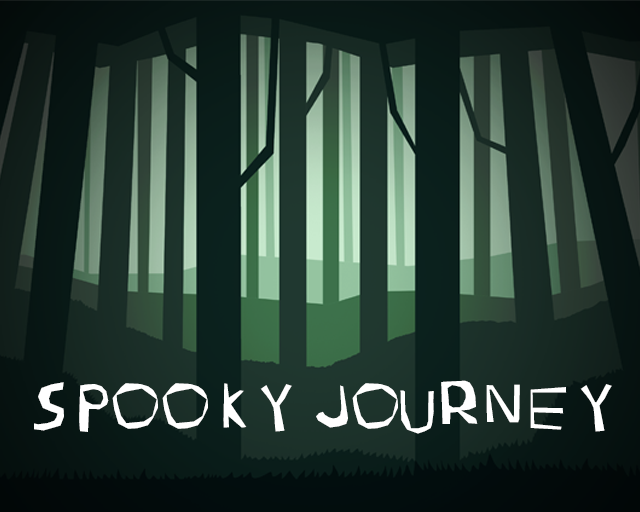
<style>
.page{position:relative;width:640px;height:512px}
.page>*{position:absolute;margin:0}
.t1{font:45.9px "Polygonnormal";color:#ffffff}
</style>
<div class="page">
<p class="t1" style="left:34px;top:380px;width:578px;height:54px">SPOOKY JOURNEY</p>
</div>
